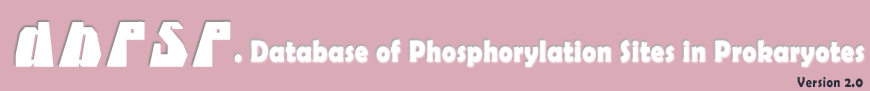
<style>
.page{position:relative;width:870px;height:91px;background:#daabb7}
.page>*{position:absolute;margin:0}
.t1{font:60px "IcicleCountry";letter-spacing:0.11em;color:#ffffff;font-weight:bold;scale:0.83 1}
.t2{font:30px "BerlinSansFBDemi-Bold";letter-spacing:0.055em;color:#ffffff;scale:0.83 1}
.t3{font:14.4px "BerlinSansFBDemi-Bold";letter-spacing:0.055em;color:#2b2f3e;scale:0.83 1}
.t4{font:14.4px "BerlinSansFBDemi-Bold";letter-spacing:0.055em;color:#676c7f;scale:0.83 1}
</style>
<div class="page">
<p class="t1" style="left:15px;top:21px;width:216px;height:46px">dbPSP</p>
<p class="t2" style="left:235px;top:39px;width:629px;height:27px">. Database of Phosphorylation Sites in Prokaryotes</p>
<p class="t3" style="left:797px;top:77px;width:66px;height:11px"><span class="t4">               <br>      </span>Version 2.0</p>
</div>
